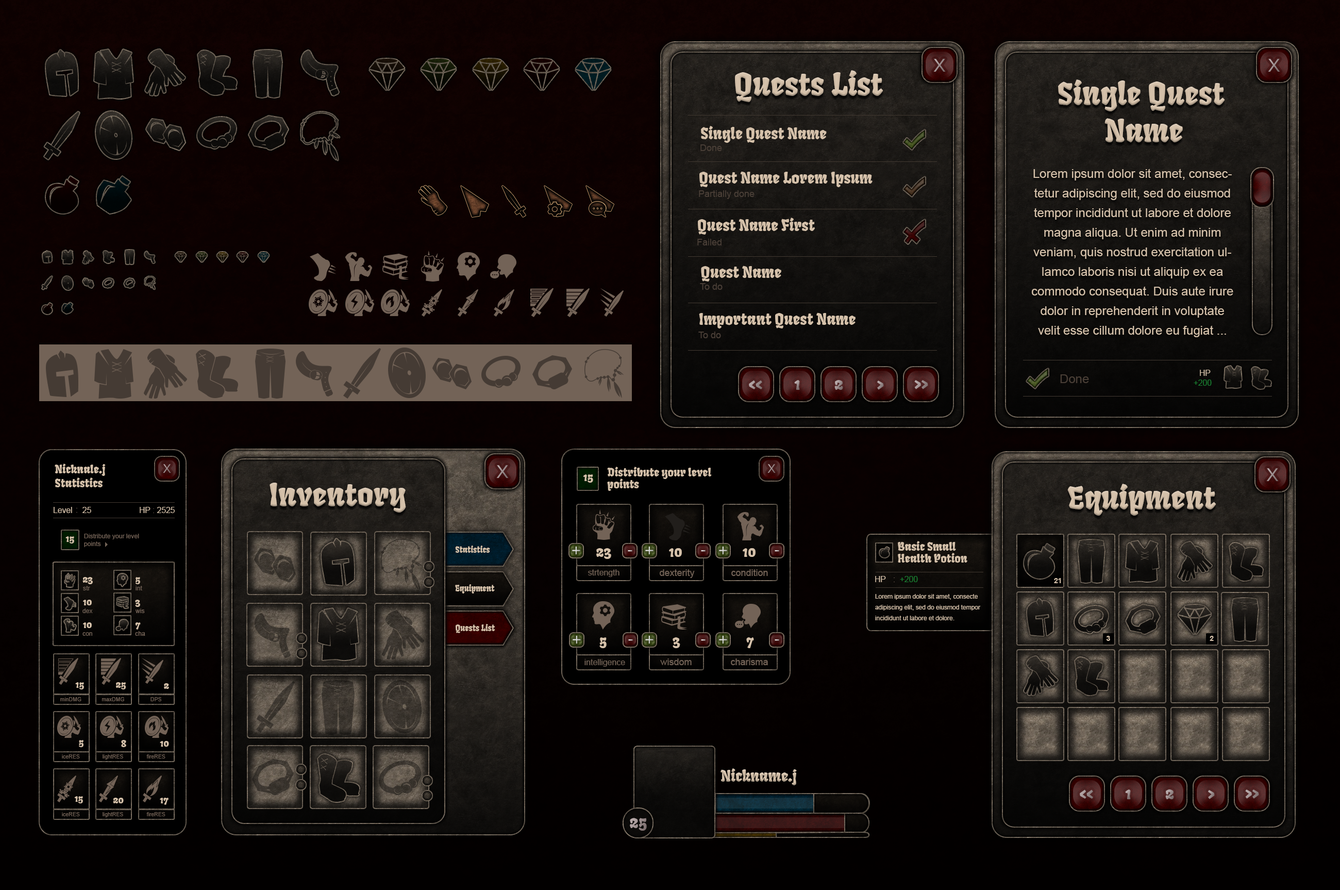
<style>
.page{position:relative;width:1340px;height:890px}
.page>*{position:absolute;margin:0}
.t1{font:24.7px "Kalinga";color:#9e9090}
.t2{font:30.9px "Fruktur-Regular";color:#d5c1aa}
.t3{font:15.5px "Fruktur-Regular";color:#d5c1aa}
.t4{font:9.3px "ArialMT";color:#493e36}
.t5{font:12.4px/19.6px "ArialMT";color:#d5c1aa}
.t6{font:12.4px "ArialMT";color:#493e36}
.t7{font:8.1px "ArialMT";color:#d5c1aa}
.t8{font:16.5px "Fruktur-Regular";color:#998b8b}
.t9{font:16.5px "Fruktur-Regular"}
.t10{font:8.1px "ArialMT";color:#197b30}
.t11{font:11.3px "Fruktur-Regular";color:#d5c1aa}
.t12{font:11.3px/11.6px "Fruktur-Regular";color:#d5c1aa}
.t13{font:11.4px "Fruktur-Regular";color:#d5c1aa}
.t14{font:8.1px "ArialMT";color:#736357}
.t15{font:8.1px "ArialMT";color:#64564b}
.t16{font:6.3px "ArialMT";color:#736357}
.t17{font:9.7px "Fruktur-Regular";color:#d5c1aa}
.t18{font:8.1px "Fruktur-Regular";color:#d5c1aa}
.t19{font:15.7px "Kalinga";color:#e0e0e0}
.t20{font:14.4px "Fruktur-Regular";color:#d5c1aa}
.t21{font:15.7px "Kalinga"}
.t22{font:8.2px "ArialMT";color:#736357}
.t23{font:9.3px "ArialMT";color:#736357}
.t24{font:7.2px "Arial-BoldMT";color:#d5c1aa}
.t25{font:6.2px/10.7px "ArialMT";color:#d5c1aa}
.t26{font:5.5px "ArialMT";color:#736357}
.t27{font:16.9px "Fruktur-Regular"}
</style>
<div class="page">
<p class="t1" style="left:934px;top:59px;width:12px;height:13px">x</p>
<p class="t1" style="left:1268px;top:59px;width:12px;height:13px">x</p>
<p class="t2" style="left:735px;top:70px;width:149px;height:32px">Quests List</p>
<p class="t2" style="left:1058px;top:79px;width:167px;height:63px;text-align:center">Single Quest <br>Name</p>
<p class="t3" style="left:701px;top:126px;width:126px;height:17px">Single Quest Name</p>
<p class="t4" style="left:701px;top:144px;width:21px;height:7px">Done</p>
<p class="t3" style="left:700px;top:171px;width:173px;height:16px">Quest Name Lorem Ipsum</p>
<p class="t5" style="left:1031px;top:169px;width:203px;height:168px;text-align:center">Lorem ipsum dolor sit amet, consectetur adipiscing elit, sed do eiusmod tempor incididunt ut labore et dolore magna aliqua. Ut enim ad minim veniam, quis nostrud exercitation ullamco laboris nisi ut aliquip ex ea commodo consequat. Duis aute irure dolor in reprehenderit in voluptate velit esse cillum dolore eu fugiat ...</p>
<p class="t4" style="left:699px;top:190px;width:56px;height:9px">Partially done</p>
<p class="t3" style="left:698px;top:218px;width:117px;height:17px">Quest Name First</p>
<p class="t4" style="left:697px;top:239px;width:25px;height:6px">Failed</p>
<p class="t3" style="left:701px;top:265px;width:80px;height:16px">Quest Name</p>
<p class="t4" style="left:700px;top:283px;width:23px;height:7px">To do</p>
<p class="t3" style="left:699px;top:312px;width:157px;height:16px">Important Quest Name</p>
<p class="t4" style="left:698px;top:331px;width:23px;height:7px">To do</p>
<p class="t6" style="left:1060px;top:374px;width:29px;height:9px">Done</p>
<p class="t7" style="left:1200px;top:370px;width:11px;height:6px">HP</p>
<p class="t8" style="left:749px;top:380px;width:13px;height:9px">&lt;&lt;</p>
<p class="t9" style="left:794px;top:380px;width:6px;height:10px">1</p>
<p class="t9" style="left:835px;top:380px;width:8px;height:10px">2</p>
<p class="t8" style="left:877px;top:380px;width:7px;height:10px">&gt;</p>
<p class="t9" style="left:914px;top:380px;width:14px;height:9px">&gt;&gt;</p>
<p class="t10" style="left:1194px;top:379px;width:18px;height:7px">+200</p>
<p class="t11" style="left:55px;top:463px;width:51px;height:24px">Nicknale.j<br>Statistics</p>
<p class="t1" style="left:496px;top:465px;width:13px;height:13px">x</p>
<p class="t12" style="left:607px;top:467px;width:105px;height:24px">Distribute your level<br>points</p>
<p class="t1" style="left:1267px;top:468px;width:12px;height:13px">x</p>
<p class="t2" style="left:270px;top:482px;width:136px;height:30px">Inventory</p>
<p class="t13" style="left:583px;top:474px;width:10px;height:8px">15</p>
<p class="t2" style="left:1068px;top:484px;width:149px;height:31px">Equipment</p>
<p class="t7" style="left:54px;top:507px;width:18px;height:6px">Level</p>
<p class="t14" style="left:76px;top:508px;width:1px;height:4px">:</p>
<p class="t7" style="left:82px;top:507px;width:9px;height:6px">25</p>
<p class="t7" style="left:140px;top:507px;width:35px;height:6px">HP <span class="t15">:</span> 2525</p>
<p class="t16" style="left:84px;top:534px;width:55px;height:13px">Distribute your level <br>points</p>
<p class="t17" style="left:65px;top:536px;width:9px;height:7px">15</p>
<p class="t18" style="left:455px;top:545px;width:35px;height:8px">Statistics</p>
<p class="t19" style="left:572px;top:546px;width:8px;height:9px">+</p>
<p class="t19" style="left:645px;top:546px;width:9px;height:9px">+</p>
<p class="t19" style="left:719px;top:546px;width:8px;height:9px">+</p>
<p class="t12" style="left:898px;top:541px;width:70px;height:22px">Basic Small <br>Health Potion</p>
<p class="t20" style="left:596px;top:548px;width:15px;height:11px">23</p>
<p class="t21" style="left:628px;top:550px;width:4px;height:2px">-</p>
<p class="t20" style="left:669px;top:548px;width:13px;height:9px">10</p>
<p class="t21" style="left:701px;top:550px;width:5px;height:2px">-</p>
<p class="t20" style="left:743px;top:548px;width:13px;height:9px">10</p>
<p class="t21" style="left:775px;top:550px;width:4px;height:2px">-</p>
<p class="t22" style="left:588px;top:569px;width:32px;height:8px">strtength</p>
<p class="t23" style="left:660px;top:569px;width:35px;height:9px">dexterity</p>
<p class="t23" style="left:731px;top:569px;width:37px;height:7px">condition</p>
<p class="t17" style="left:82px;top:577px;width:11px;height:7px">23</p>
<p class="t17" style="left:136px;top:577px;width:4px;height:7px">5</p>
<p class="t7" style="left:875px;top:576px;width:11px;height:6px">HP</p>
<p class="t14" style="left:894px;top:577px;width:1px;height:5px">:</p>
<p class="t10" style="left:900px;top:576px;width:18px;height:6px">+200</p>
<p class="t24" style="left:1054px;top:578px;width:7px;height:5px">21</p>
<p class="t16" style="left:83px;top:586px;width:7px;height:4px">str</p>
<p class="t16" style="left:136px;top:586px;width:6px;height:4px">int</p>
<p class="t18" style="left:455px;top:584px;width:40px;height:9px">Equipment</p>
<p class="t25" style="left:875px;top:594px;width:106px;height:26px">Lorem ipsum dolor sit amet, consecte<br>adipiscing elit, sed do eiusmod tempor<br>incididunt ut labore et dolore.</p>
<p class="t17" style="left:83px;top:600px;width:9px;height:5px">10</p>
<p class="t17" style="left:135px;top:600px;width:5px;height:7px">3</p>
<p class="t16" style="left:82px;top:608px;width:11px;height:5px">dex</p>
<p class="t16" style="left:136px;top:608px;width:9px;height:5px">wis</p>
<p class="t17" style="left:83px;top:622px;width:9px;height:6px">10</p>
<p class="t17" style="left:135px;top:622px;width:6px;height:7px">7</p>
<p class="t18" style="left:456px;top:624px;width:39px;height:9px">Quests List</p>
<p class="t16" style="left:82px;top:632px;width:10px;height:4px">con</p>
<p class="t16" style="left:135px;top:631px;width:10px;height:5px">cha</p>
<p class="t19" style="left:573px;top:635px;width:8px;height:9px">+</p>
<p class="t20" style="left:600px;top:637px;width:7px;height:11px">5</p>
<p class="t21" style="left:628px;top:639px;width:5px;height:2px">-</p>
<p class="t19" style="left:645px;top:635px;width:9px;height:9px">+</p>
<p class="t20" style="left:673px;top:637px;width:7px;height:11px">3</p>
<p class="t21" style="left:701px;top:639px;width:5px;height:2px">-</p>
<p class="t19" style="left:719px;top:635px;width:8px;height:9px">+</p>
<p class="t20" style="left:746px;top:637px;width:8px;height:11px">7</p>
<p class="t21" style="left:775px;top:639px;width:4px;height:2px">-</p>
<p class="t24" style="left:1107px;top:636px;width:3px;height:5px">3</p>
<p class="t24" style="left:1210px;top:636px;width:4px;height:5px">2</p>
<p class="t22" style="left:585px;top:659px;width:40px;height:8px">intelligence</p>
<p class="t23" style="left:660px;top:658px;width:32px;height:7px">wisdom</p>
<p class="t23" style="left:731px;top:658px;width:37px;height:7px">charisma</p>
<p class="t17" style="left:75px;top:682px;width:9px;height:7px">15</p>
<p class="t17" style="left:116px;top:682px;width:10px;height:7px">25</p>
<p class="t17" style="left:164px;top:683px;width:5px;height:6px">2</p>
<p class="t26" style="left:60px;top:697px;width:21px;height:4px">minDMG</p>
<p class="t26" style="left:102px;top:697px;width:22px;height:4px">maxDMG</p>
<p class="t26" style="left:151px;top:697px;width:10px;height:4px">DPS</p>
<p class="t17" style="left:79px;top:740px;width:5px;height:7px">5</p>
<p class="t17" style="left:121px;top:740px;width:5px;height:7px">8</p>
<p class="t17" style="left:160px;top:741px;width:9px;height:5px">10</p>
<p class="t26" style="left:62px;top:754px;width:18px;height:4px">iceRES</p>
<p class="t26" style="left:103px;top:754px;width:20px;height:5px">lightRES</p>
<p class="t26" style="left:146px;top:754px;width:19px;height:4px">fireRES</p>
<p class="t3" style="left:721px;top:768px;width:76px;height:17px">Nickname.j</p>
<p class="t17" style="left:74px;top:796px;width:9px;height:7px">15</p>
<p class="t17" style="left:113px;top:797px;width:11px;height:6px">20</p>
<p class="t17" style="left:160px;top:797px;width:9px;height:8px">17</p>
<p class="t8" style="left:1080px;top:789px;width:13px;height:9px">&lt;&lt;</p>
<p class="t9" style="left:1125px;top:789px;width:6px;height:10px">1</p>
<p class="t9" style="left:1165px;top:789px;width:9px;height:10px">2</p>
<p class="t8" style="left:1208px;top:790px;width:7px;height:9px">&gt;</p>
<p class="t9" style="left:1245px;top:789px;width:14px;height:9px">&gt;&gt;</p>
<p class="t26" style="left:62px;top:812px;width:18px;height:4px">iceRES</p>
<p class="t26" style="left:103px;top:812px;width:20px;height:5px">lightRES</p>
<p class="t26" style="left:146px;top:812px;width:19px;height:4px">fireRES</p>
<p class="t27" style="left:630px;top:818px;width:17px;height:12px">25</p>
</div>
